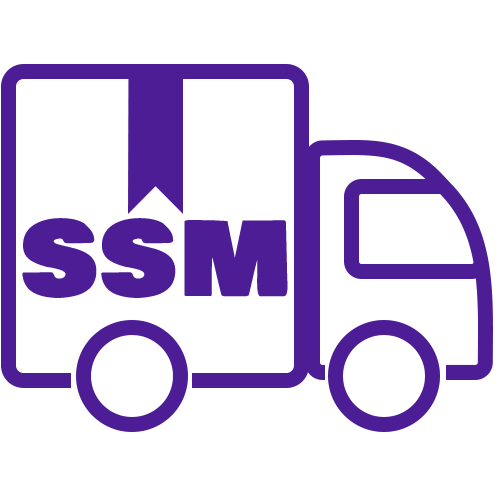
<style>
.page{position:relative;width:500px;height:500px;background:#ffffff}
.page>*{position:absolute;margin:0}
.t1{font:100px "BowlbyOneSC-Regular";color:#4c1d95;font-weight:bold;scale:1.05 1}
</style>
<div class="page">
<p class="t1" style="left:22px;top:218px;width:266px;height:80px">SSM</p>
</div>
